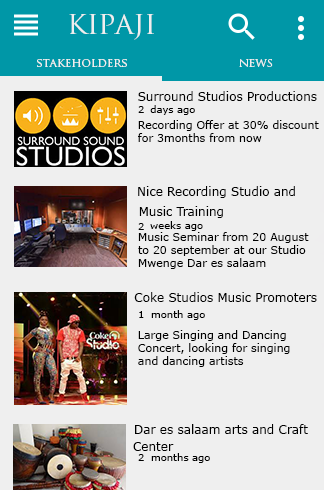
<style>
.page{position:relative;width:324px;height:490px;background:#efefef}
.page>*{position:absolute;margin:0}
.t1{font:30px "TrajanPro-Regular";color:#efefef}
.t2{font:12px "TrajanPro-Regular";color:#efefef}
.t3{font:12px "Verdana";color:#000000}
.t4{font:10px "Verdana";color:#000000}
.t5{font:11px "Verdana";color:#000000}
</style>
<div class="page">
<p class="t1" style="left:69px;top:14px;width:85px;height:26px">kipaji</p>
<p class="t2" style="left:37px;top:59px;width:90px;height:8px">stakeholders</p>
<p class="t2" style="left:239px;top:59px;width:34px;height:8px">news</p>
<p class="t3" style="left:138px;top:91px;width:179px;height:10px">Surround Studios Productions</p>
<p class="t4" style="left:138px;top:106px;width:6px;height:7px">2</p>
<p class="t4" style="left:150px;top:105px;width:45px;height:10px">days ago</p>
<p class="t5" style="left:138px;top:120px;width:181px;height:22px;text-align:right">Recording Offer at 30% discount <br>for 3months from now</p>
<p class="t3" style="left:138px;top:186px;width:157px;height:12px">Nice Recording Studio and</p>
<p class="t3" style="left:139px;top:206px;width:84px;height:12px">Music Training</p>
<p class="t4" style="left:150px;top:221px;width:53px;height:10px">weeks ago</p>
<p class="t4" style="left:138px;top:223px;width:6px;height:7px">2</p>
<p class="t5" style="left:138px;top:232px;width:171px;height:37px;text-align:right">Music Seminar from 20 August<br>to 20 september at our Studio<br>Mwenge Dar es salaam</p>
<p class="t3" style="left:134px;top:292px;width:183px;height:10px">Coke Studios Music Promoters</p>
<p class="t4" style="left:139px;top:311px;width:5px;height:7px">1</p>
<p class="t4" style="left:151px;top:310px;width:54px;height:10px">month ago</p>
<p class="t5" style="left:138px;top:330px;width:152px;height:37px;text-align:right">Large Singing and Dancing <br>Concert, looking for singing <br>and dancing artists</p>
<p class="t3" style="left:135px;top:424px;width:173px;height:10px">Dar es salaam arts and Craft</p>
<p class="t3" style="left:133px;top:442px;width:41px;height:9px">Center</p>
<p class="t4" style="left:138px;top:454px;width:6px;height:7px">2</p>
<p class="t4" style="left:151px;top:453px;width:59px;height:10px">months ago</p>
</div>
